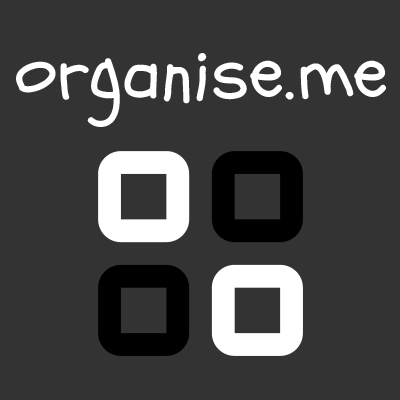
<style>
.page{position:relative;width:400px;height:400px;background:#333333}
.page>*{position:absolute;margin:0}
.t1{font:80px "Schoolbell-Regular";color:#ffffff}
</style>
<div class="page">
<p class="t1" style="left:16px;top:53px;width:370px;height:74px">organise.me</p>
</div>
